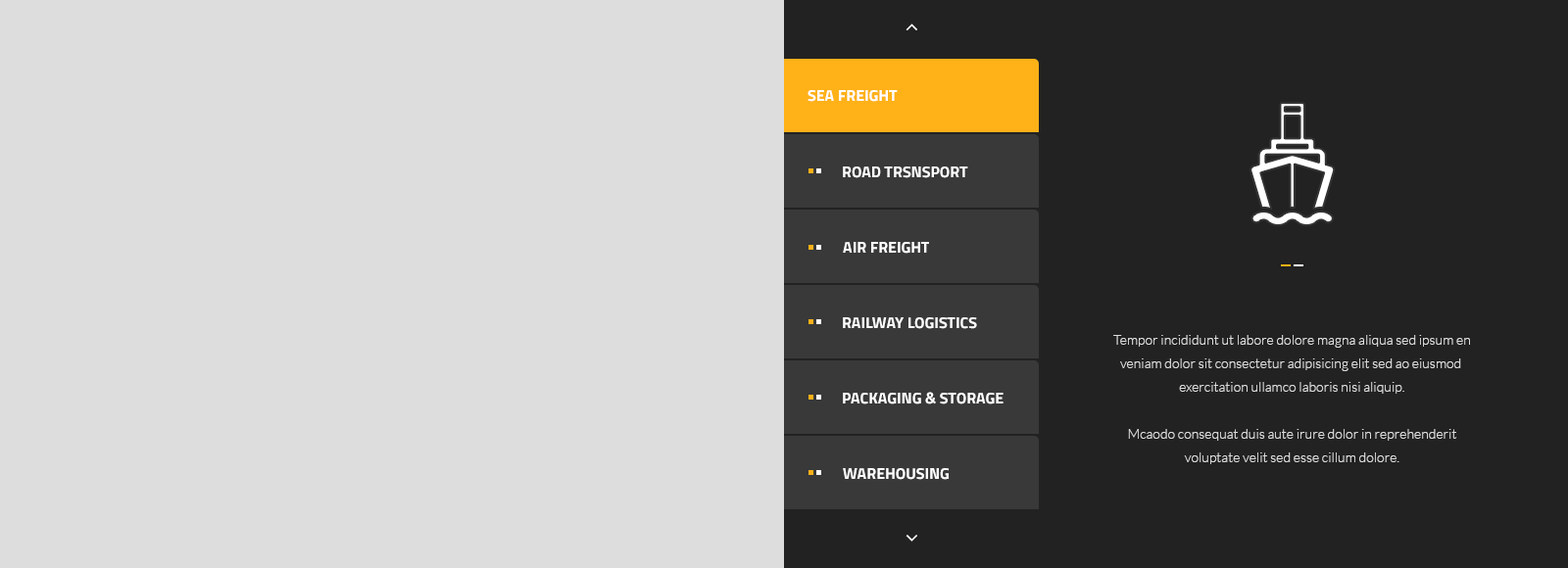
<style>
.page{position:relative;width:1568px;height:568px;background:#dddddd}
.page>*{position:absolute;margin:0}
.t1{font:15.7px "Titillium-Bold";color:#ffffff;text-transform:uppercase}
.t2{font:13.7px/23.5px "Lato-Light"}
.t3{font:13.7px/23.5px "Lato-Light";color:#dddddd}
</style>
<div class="page">
<p class="t1" style="left:808px;top:90px;width:90px;height:12px">sea freight</p>
<p class="t1" style="left:843px;top:167px;width:125px;height:11px">road trsnsport</p>
<p class="t1" style="left:843px;top:167px;width:125px;height:11px">road trsnsport</p>
<p class="t1" style="left:843px;top:167px;width:125px;height:11px">road trsnsport</p>
<p class="t1" style="left:843px;top:167px;width:125px;height:11px">road trsnsport</p>
<p class="t1" style="left:843px;top:167px;width:125px;height:11px">road trsnsport</p>
<p class="t1" style="left:843px;top:242px;width:86px;height:12px">air freight</p>
<p class="t1" style="left:843px;top:242px;width:86px;height:12px">air freight</p>
<p class="t1" style="left:843px;top:242px;width:86px;height:12px">air freight</p>
<p class="t1" style="left:843px;top:242px;width:86px;height:12px">air freight</p>
<p class="t1" style="left:843px;top:242px;width:86px;height:12px">air freight</p>
<p class="t1" style="left:843px;top:318px;width:134px;height:11px">railway logistics</p>
<p class="t1" style="left:843px;top:318px;width:134px;height:11px">railway logistics</p>
<p class="t1" style="left:843px;top:318px;width:134px;height:11px">railway logistics</p>
<p class="t1" style="left:843px;top:318px;width:134px;height:11px">railway logistics</p>
<p class="t1" style="left:843px;top:318px;width:134px;height:11px">railway logistics</p>
<p class="t2" style="left:1113px;top:338px;width:357px;height:129px;text-align:center">Tempor incididunt ut labore dolore magna aliqua sed ipsum en<br>veniam dolor sit consectetur adipisicing elit sed ao eiusmod <br>exercitation ullamco laboris nisi aliquip.<br><br>Mcaodo consequat duis aute irure dolor in reprehenderit<br>voluptate velit sed esse cillum dolore.</p>
<p class="t3" style="left:1113px;top:335px;width:357px;height:130px;text-align:center">Tempor incididunt ut labore dolore magna aliqua sed ipsum en<br>veniam dolor sit consectetur adipisicing elit sed ao eiusmod <br>exercitation ullamco laboris nisi aliquip.<br><br>Mcaodo consequat duis aute irure dolor in reprehenderit<br>voluptate velit sed esse cillum dolore.</p>
<p class="t1" style="left:843px;top:392px;width:161px;height:13px">packaging &amp; storage</p>
<p class="t1" style="left:843px;top:392px;width:161px;height:13px">packaging &amp; storage</p>
<p class="t1" style="left:843px;top:392px;width:161px;height:13px">packaging &amp; storage</p>
<p class="t1" style="left:843px;top:392px;width:161px;height:13px">packaging &amp; storage</p>
<p class="t1" style="left:843px;top:392px;width:161px;height:13px">packaging &amp; storage</p>
<p class="t1" style="left:843px;top:468px;width:106px;height:12px">warehousing</p>
<p class="t1" style="left:843px;top:468px;width:106px;height:12px">warehousing</p>
<p class="t1" style="left:843px;top:468px;width:106px;height:12px">warehousing</p>
<p class="t1" style="left:843px;top:468px;width:106px;height:12px">warehousing</p>
<p class="t1" style="left:843px;top:468px;width:106px;height:12px">warehousing</p>
</div>
